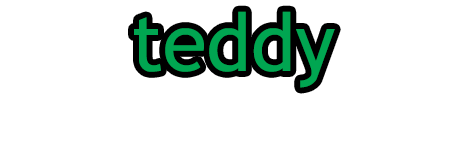
<style>
.page{position:relative;width:451px;height:154px;background:#ffffff}
.page>*{position:absolute;margin:0}
.t1{font:80px "TrebuchetMS";color:#00a651}
</style>
<div class="page">
<p class="t1" style="left:134px;top:11px;width:201px;height:77px">teddy</p>
</div>
